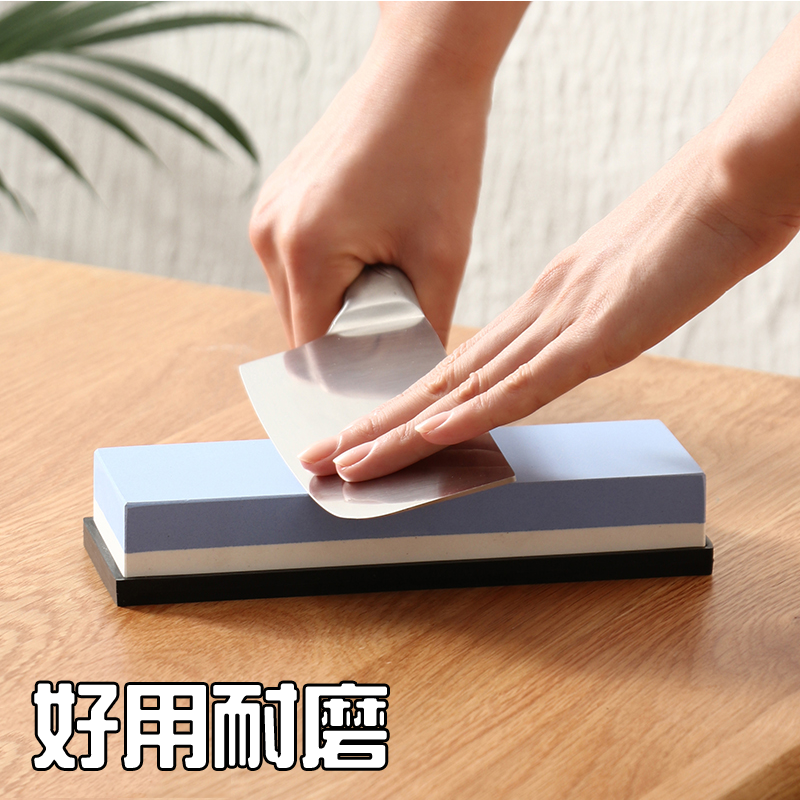
<style>
.page{position:relative;width:800px;height:800px}
.page>*{position:absolute;margin:0}
.t1{font:89.6px "HanWangZonYi";color:#ffffff}
</style>
<div class="page">
<p class="t1" style="left:34px;top:683px;width:353px;height:85px">好用耐磨</p>
</div>
